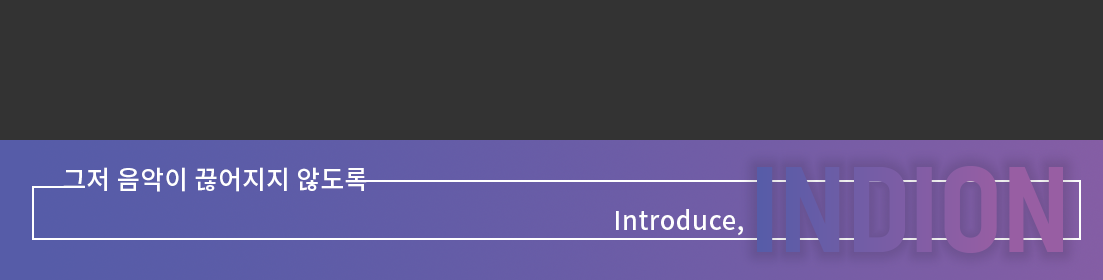
<style>
.page{position:relative;width:1103px;height:280px;background:#333333}
.page>*{position:absolute;margin:0}
.t1{font:25.9px "NotoSansKR-Medium";letter-spacing:0.02em;color:#ffffff}
</style>
<div class="page">
<p class="t1" style="left:63px;top:167px;width:304px;height:25px">그저 음악이 끊어지지 않도록</p>
<p class="t1" style="left:616px;top:209px;width:127px;height:27px">Introduce,</p>
</div>
